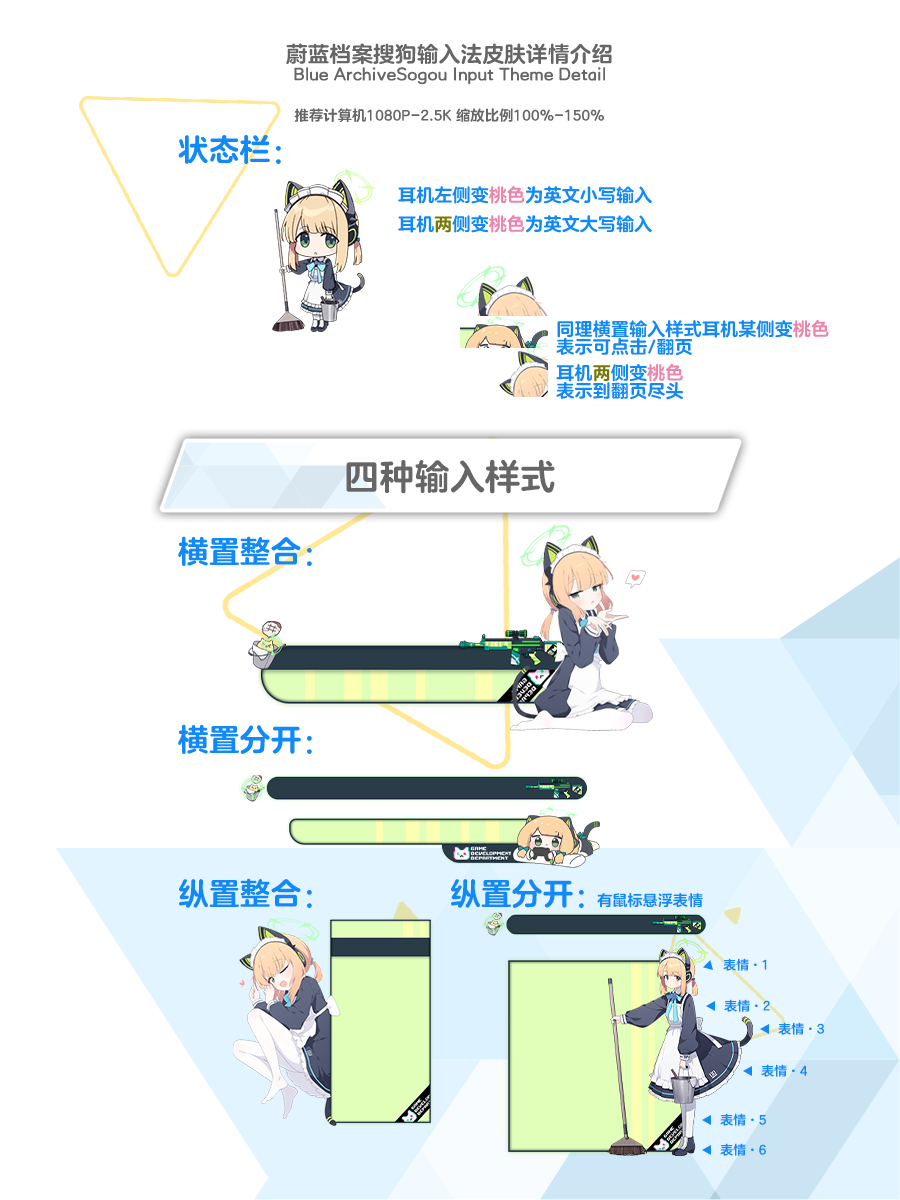
<style>
.page{position:relative;width:900px;height:1200px;background:#ffffff}
.page>*{position:absolute;margin:0}
.t1{font:21.6px "FZLANTY_CUJW--GB1-0";letter-spacing:0.01em;color:#666666}
.t2{font:16.9px "FZLANTY_CUJW--GB1-0";letter-spacing:0.01em;color:#666666}
.t3{font:14.3px "FZLANTY_CUJW--GB1-0";letter-spacing:0.01em;color:#666666}
.t4{font:30.6px "FZLANTY_CUJW--GB1-0";letter-spacing:0.01em;color:#1289f8}
.t5{font:18px "FZLANTY_CUJW--GB1-0";letter-spacing:0.01em;color:#1289f8}
.t6{font:18px "FZLANTY_CUJW--GB1-0";letter-spacing:0.01em;color:#ec85ac}
.t7{font:18px "FZLANTY_CUJW--GB1-0";letter-spacing:0.01em;color:#767a04}
.t8{font:18px/18px "FZLANTY_CUJW--GB1-0";letter-spacing:0.01em;color:#1289f8}
.t9{font:18px/18px "FZLANTY_CUJW--GB1-0";letter-spacing:0.01em;color:#ec85ac}
.t10{font:18px/18px "FZLANTY_CUJW--GB1-0";letter-spacing:0.01em;color:#767a04}
.t11{font:34.9px "FZLANTY_CUJW--GB1-0";letter-spacing:0.01em;color:#666666}
.t12{font:14.9px "FZLANTY_CUJW--GB1-0";letter-spacing:0.01em;color:#1289f8}
.t13{font:12.7px "FZLANTY_CUJW--GB1-0";letter-spacing:0.01em;color:#1289f8}
</style>
<div class="page">
<p class="t1" style="left:286px;top:43px;width:326px;height:22px">蔚蓝档案搜狗输入法皮肤详情介绍</p>
<p class="t2" style="left:294px;top:67px;width:311px;height:18px">Blue ArchiveSogou Input Theme Detail</p>
<p class="t3" style="left:294px;top:108px;width:310px;height:14px">推荐计算机1080P-2.5K 缩放比例100%-150%</p>
<p class="t4" style="left:178px;top:134px;width:103px;height:30px">状态栏：</p>
<p class="t5" style="left:398px;top:186px;width:254px;height:18px">耳机左侧变<span class="t6">桃色</span>为英文小写输入</p>
<p class="t5" style="left:398px;top:215px;width:254px;height:18px">耳机<span class="t7">两</span>侧变<span class="t6">桃色</span>为英文大写输入</p>
<p class="t8" style="left:556px;top:320px;width:273px;height:36px">同理横置输入样式耳机某侧变<span class="t9">桃色<br></span>表示可点击/翻页</p>
<p class="t8" style="left:556px;top:363px;width:128px;height:37px">耳机<span class="t10">两</span>侧变<span class="t9">桃色<br></span>表示到翻页尽头</p>
<p class="t11" style="left:346px;top:459px;width:209px;height:35px">四种输入样式</p>
<p class="t4" style="left:178px;top:536px;width:134px;height:30px">横置整合：</p>
<p class="t4" style="left:178px;top:724px;width:134px;height:30px">横置分开：</p>
<p class="t4" style="left:179px;top:878px;width:133px;height:30px">纵置整合：</p>
<p class="t4" style="left:451px;top:879px;width:133px;height:29px">纵置分开：</p>
<p class="t12" style="left:597px;top:892px;width:106px;height:16px">有鼠标悬浮表情</p>
<p class="t13" style="left:723px;top:958px;width:44px;height:13px">表情·1</p>
<p class="t13" style="left:724px;top:999px;width:46px;height:13px">表情·2</p>
<p class="t13" style="left:778px;top:1022px;width:46px;height:13px">表情·3</p>
<p class="t13" style="left:761px;top:1064px;width:46px;height:13px">表情·4</p>
<p class="t13" style="left:720px;top:1113px;width:46px;height:13px">表情·5</p>
<p class="t13" style="left:720px;top:1143px;width:46px;height:13px">表情·6</p>
</div>
